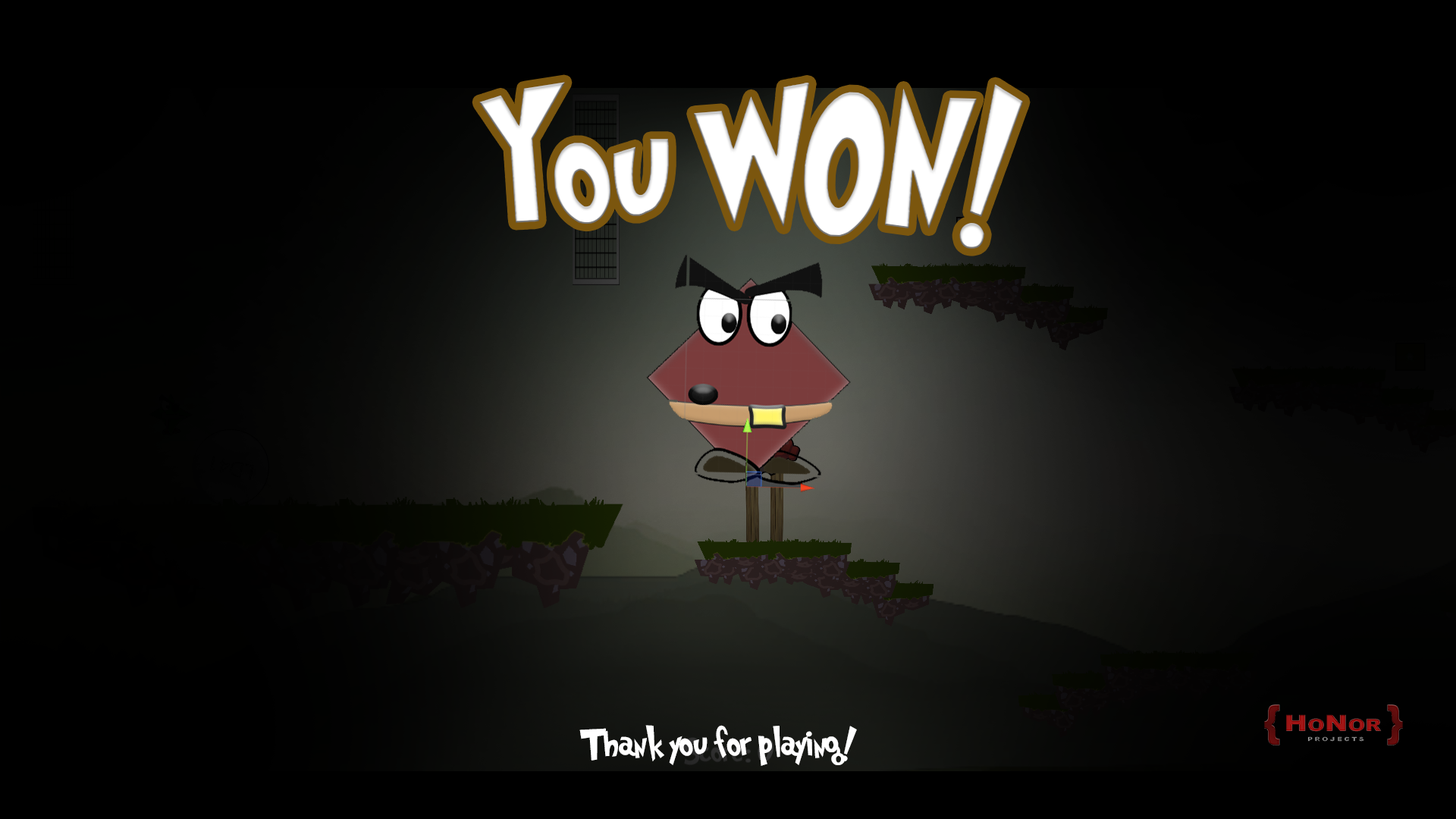
<style>
.page{position:relative;width:1456px;height:819px;background:#000000}
.page>*{position:absolute;margin:0}
.t1{font:168.9px "Grinched";color:#ffffff;scale:0.9 1}
.t2{font:36.4px "Grinched";color:#ffffff}
</style>
<div class="page">
<p class="t1" style="left:479px;top:82px;width:544px;height:167px">You WON!</p>
<p class="t2" style="left:579px;top:725px;width:278px;height:41px">Thank you for playing!</p>
</div>
